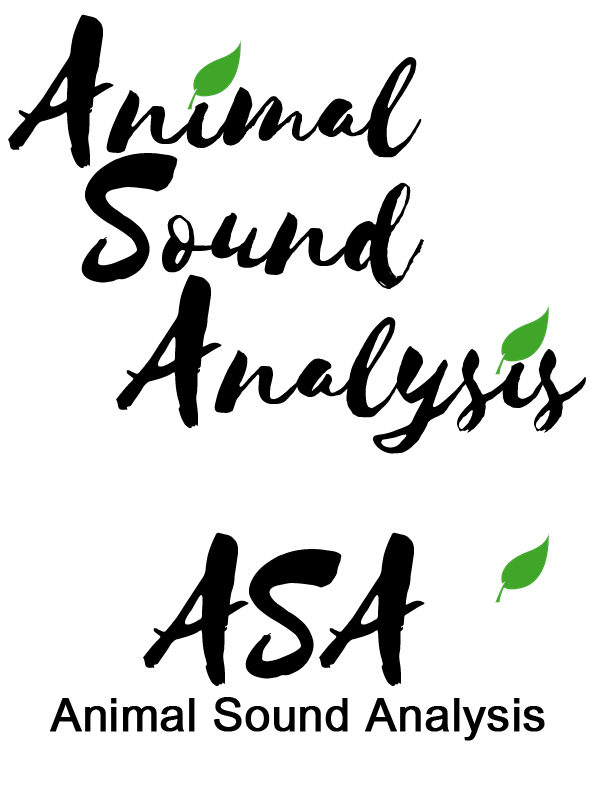
<style>
.page{position:relative;width:600px;height:798px;background:#ffffff}
.page>*{position:absolute;margin:0}
.t1{font:150px "Selima";color:#000000}
.t2{font:200px "Selima";color:#000000}
.t3{font:46px "ArialUnicodeMS";color:#000000;font-weight:bold}
</style>
<div class="page">
<p class="t1" style="left:8px;top:14px;width:414px;height:154px"><span class="t2">A</span>nimal</p>
<p class="t1" style="left:81px;top:153px;width:343px;height:136px"><span class="t2">S</span>ound</p>
<p class="t1" style="left:116px;top:274px;width:470px;height:180px"><span class="t2">A</span>nalysis</p>
<p class="t2" style="left:143px;top:532px;width:282px;height:154px">ASA</p>
<p class="t3" style="left:50px;top:697px;width:495px;height:44px">Animal Sound Analysis</p>
</div>
